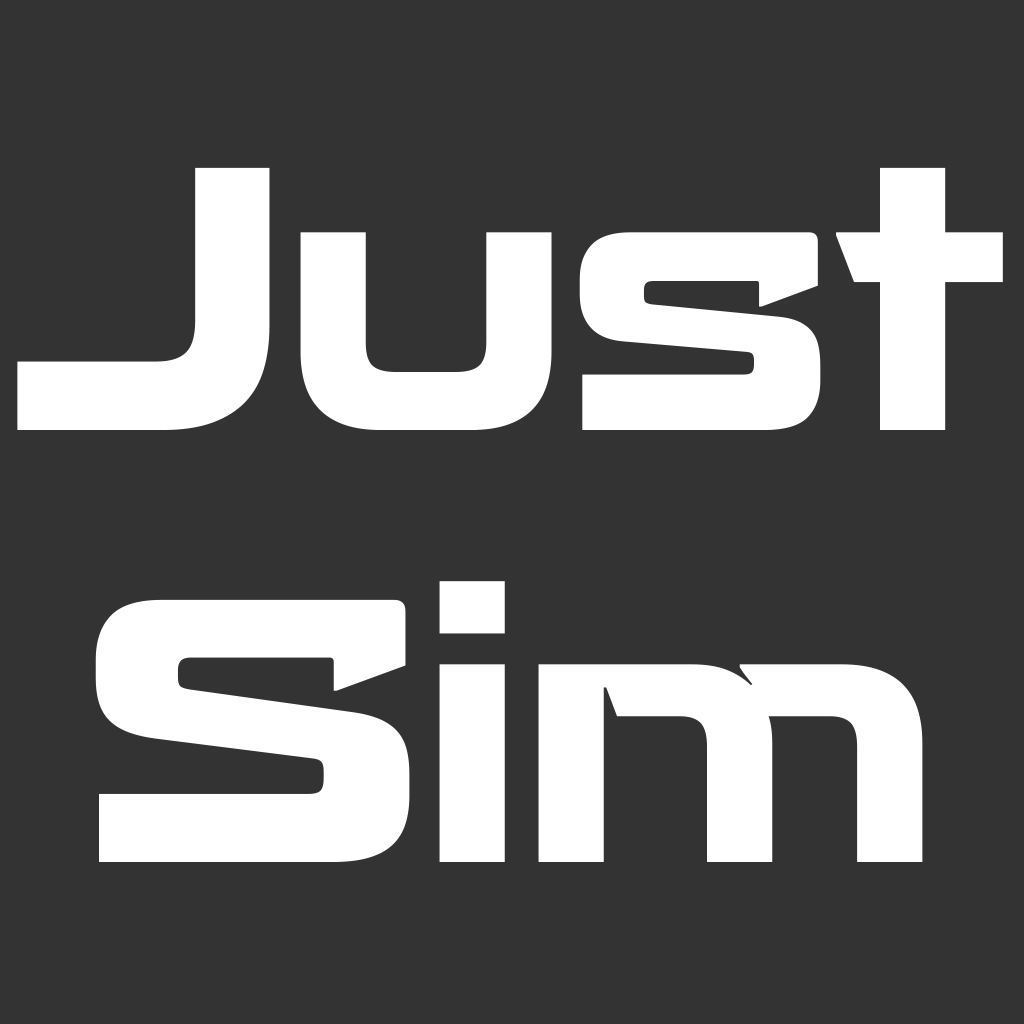
<style>
.page{position:relative;width:1024px;height:1024px;background:#333333}
.page>*{position:absolute;margin:0}
.t1{font:360px "RechargeRg-Bold";color:#ffffff}
</style>
<div class="page">
<p class="t1" style="left:17px;top:167px;width:986px;height:695px;text-align:center">Just Sim</p>
</div>
